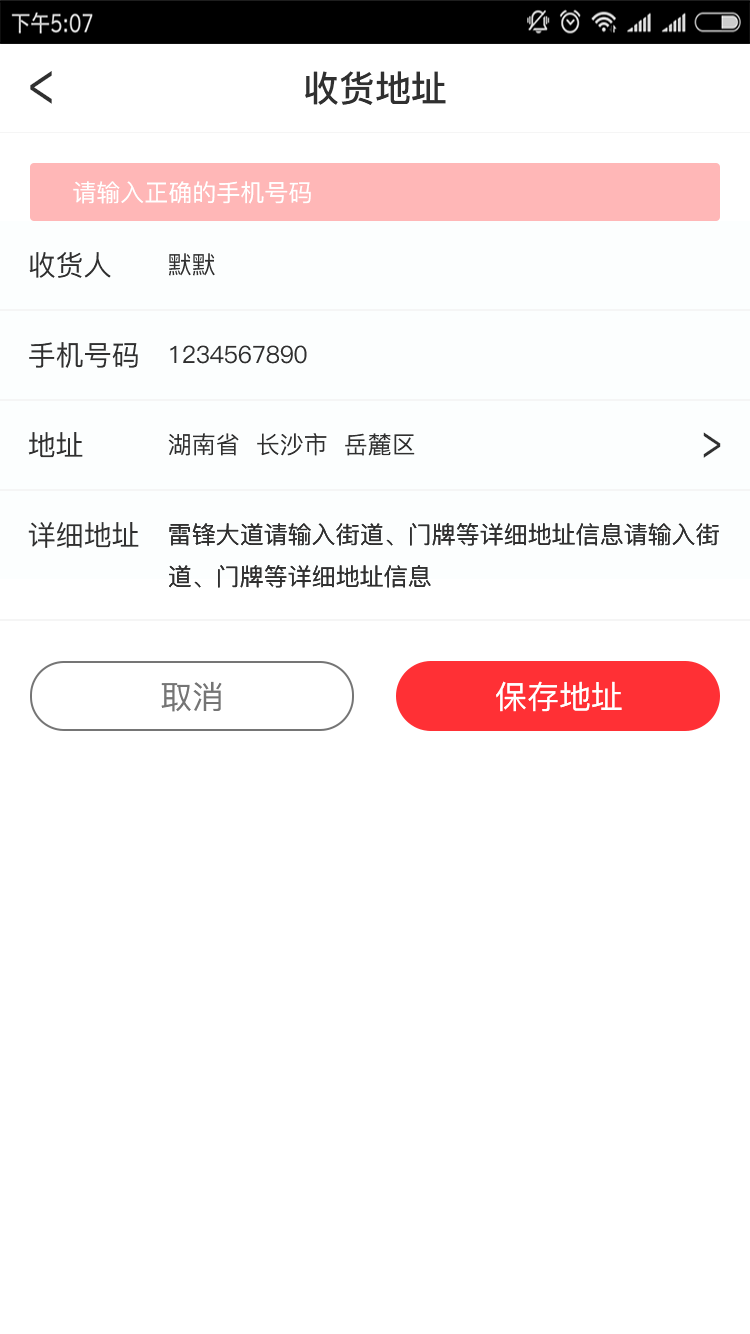
<style>
.page{position:relative;width:750px;height:1334px;background:#ffffff}
.page>*{position:absolute;margin:0}
.t1{font:64.6px "PingFang-SC-Medium";color:#303030;scale:0.66 1}
.t2{font:36px "PingFang-SC-Bold";color:#303030}
.t3{font:24px "PingFang-SC-Medium";color:#ffffff}
.t4{font:28px "PingFang-SC-Medium";color:#303030}
.t5{font:24px "PingFang-SC-Medium";color:#303030}
.t6{font:50px "PingFang-SC-Medium";color:#303030;scale:0.66 1}
.t7{font:32px "PingFang-SC-Medium";color:#757575}
.t8{font:32px "PingFang-SC-Medium";color:#ffffff}
</style>
<div class="page">
<p class="t1" style="left:30px;top:71px;width:22px;height:33px;rotate:180deg">&gt;</p>
<p class="t2" style="left:305px;top:71px;width:141px;height:34px">收货地址</p>
<p class="t3" style="left:73px;top:181px;width:238px;height:23px">请输入正确的手机号码</p>
<p class="t4" style="left:29px;top:252px;width:82px;height:26px">收货人</p>
<p class="t5" style="left:169px;top:253px;width:46px;height:23px">默默</p>
<p class="t4" style="left:29px;top:342px;width:109px;height:26px">手机号码</p>
<p class="t5" style="left:170px;top:345px;width:137px;height:19px">1234567890</p>
<p class="t4" style="left:28px;top:432px;width:55px;height:26px">地址</p>
<p class="t5" style="left:168px;top:433px;width:247px;height:23px">湖南省  长沙市  岳麓区</p>
<p class="t6" style="left:703px;top:432px;width:18px;height:26px">&gt;</p>
<p class="t4" style="left:28px;top:522px;width:111px;height:26px">详细地址</p>
<p class="t5" style="left:169px;top:523px;width:550px;height:65px">雷锋大道请输入街道、门牌等详细地址信息请输入街<br>道、门牌等详细地址信息</p>
<p class="t5" style="left:169px;top:523px;width:550px;height:65px">雷锋大道请输入街道、门牌等详细地址信息请输入街<br>道、门牌等详细地址信息</p>
<p class="t7" style="left:161px;top:681px;width:61px;height:31px">取消</p>
<p class="t8" style="left:496px;top:681px;width:126px;height:31px">保存地址</p>
</div>
